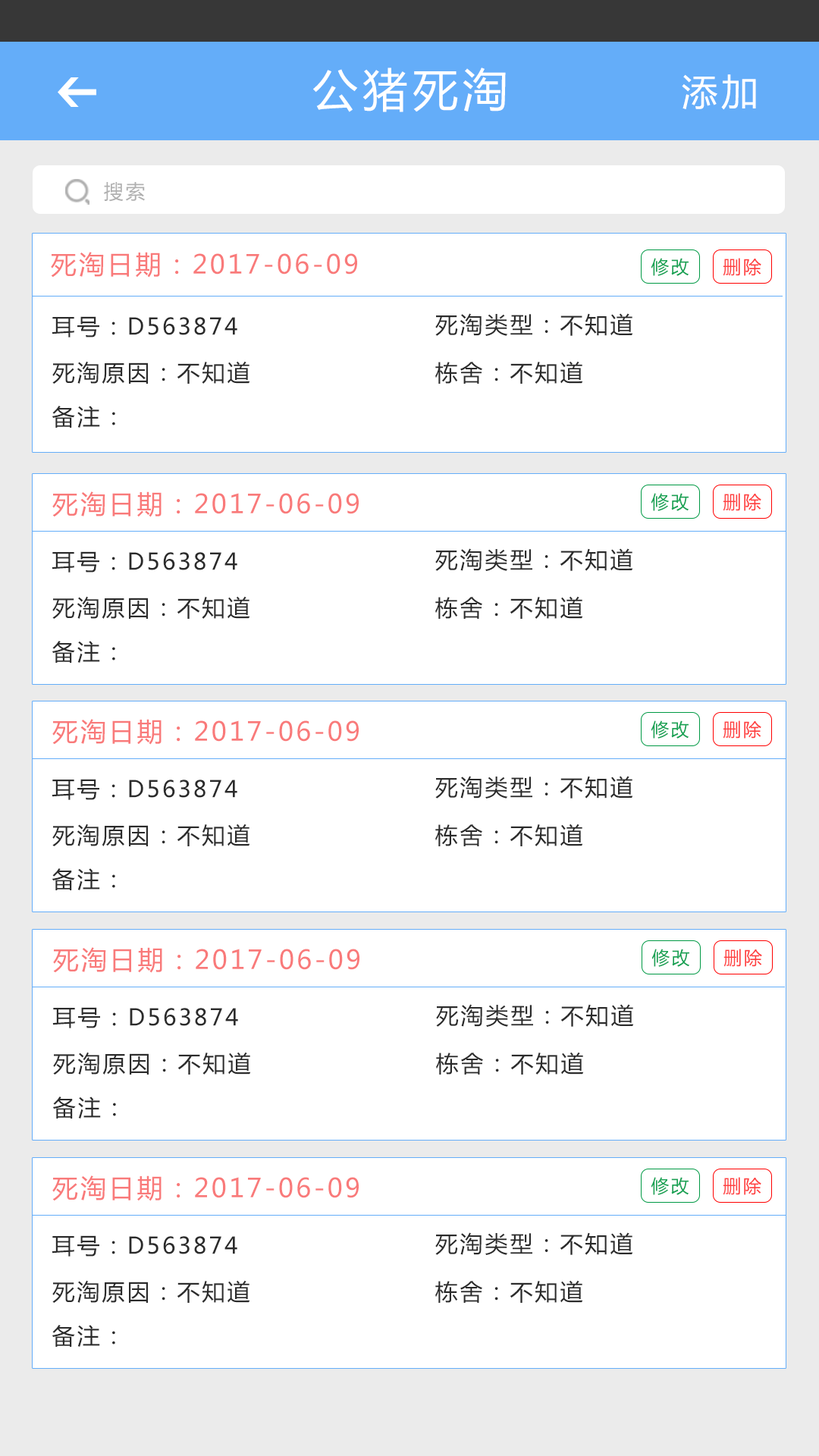
<style>
.page{position:relative;width:819px;height:1456px;background:#ffffff}
.page>*{position:absolute;margin:0}
.t1{font:45.5px "MicrosoftYaHei";letter-spacing:0.1em;color:#ffffff}
.t2{font:36.4px "MicrosoftYaHei";letter-spacing:0.1em;color:#ffffff}
.t3{font:19.7px "MicrosoftYaHei";letter-spacing:0.1em;color:#b0b0b0}
.t4{font:25.8px "MicrosoftYaHei";letter-spacing:0.1em;color:#f97a7a}
.t5{font:18.2px "MicrosoftYaHei";letter-spacing:0.1em;color:#16a254}
.t6{font:18.2px "MicrosoftYaHei";letter-spacing:0.1em;color:#ff3f3f}
.t7{font:22.7px "MicrosoftYaHei";letter-spacing:0.1em;color:#2b2b2b}
</style>
<div class="page">
<p class="t1" style="left:313px;top:67px;width:193px;height:45px">公猪死淘</p>
<p class="t2" style="left:682px;top:74px;width:74px;height:36px">添加</p>
<p class="t3" style="left:104px;top:182px;width:41px;height:20px">搜索</p>
<p class="t4" style="left:51px;top:252px;width:306px;height:26px">死淘日期：2017-06-09</p>
<p class="t5" style="left:651px;top:258px;width:38px;height:18px">修改</p>
<p class="t6" style="left:723px;top:258px;width:38px;height:18px">删除</p>
<p class="t7" style="left:52px;top:316px;width:185px;height:21px">耳号：D563874</p>
<p class="t7" style="left:435px;top:313px;width:198px;height:23px">死淘类型：不知道</p>
<p class="t7" style="left:52px;top:361px;width:198px;height:23px">死淘原因：不知道</p>
<p class="t7" style="left:435px;top:361px;width:148px;height:23px">栋舍：不知道</p>
<p class="t7" style="left:52px;top:406px;width:63px;height:22px">备注：</p>
<p class="t4" style="left:52px;top:491px;width:307px;height:26px">死淘日期：2017-06-09</p>
<p class="t5" style="left:651px;top:493px;width:38px;height:18px">修改</p>
<p class="t6" style="left:723px;top:493px;width:38px;height:18px">删除</p>
<p class="t7" style="left:52px;top:551px;width:185px;height:22px">耳号：D563874</p>
<p class="t7" style="left:435px;top:548px;width:198px;height:23px">死淘类型：不知道</p>
<p class="t7" style="left:52px;top:596px;width:198px;height:23px">死淘原因：不知道</p>
<p class="t7" style="left:435px;top:596px;width:148px;height:23px">栋舍：不知道</p>
<p class="t7" style="left:52px;top:641px;width:63px;height:22px">备注：</p>
<p class="t4" style="left:52px;top:719px;width:307px;height:26px">死淘日期：2017-06-09</p>
<p class="t5" style="left:651px;top:720px;width:38px;height:19px">修改</p>
<p class="t6" style="left:723px;top:720px;width:38px;height:19px">删除</p>
<p class="t7" style="left:52px;top:779px;width:185px;height:21px">耳号：D563874</p>
<p class="t7" style="left:435px;top:776px;width:198px;height:23px">死淘类型：不知道</p>
<p class="t7" style="left:52px;top:824px;width:198px;height:22px">死淘原因：不知道</p>
<p class="t7" style="left:435px;top:824px;width:148px;height:22px">栋舍：不知道</p>
<p class="t7" style="left:52px;top:868px;width:63px;height:22px">备注：</p>
<p class="t4" style="left:53px;top:947px;width:306px;height:26px">死淘日期：2017-06-09</p>
<p class="t5" style="left:651px;top:949px;width:39px;height:18px">修改</p>
<p class="t6" style="left:723px;top:949px;width:39px;height:18px">删除</p>
<p class="t7" style="left:52px;top:1007px;width:186px;height:21px">耳号：D563874</p>
<p class="t7" style="left:436px;top:1004px;width:198px;height:23px">死淘类型：不知道</p>
<p class="t7" style="left:53px;top:1052px;width:198px;height:23px">死淘原因：不知道</p>
<p class="t7" style="left:436px;top:1052px;width:148px;height:23px">栋舍：不知道</p>
<p class="t7" style="left:52px;top:1097px;width:64px;height:22px">备注：</p>
<p class="t4" style="left:52px;top:1175px;width:307px;height:26px">死淘日期：2017-06-09</p>
<p class="t5" style="left:651px;top:1177px;width:38px;height:18px">修改</p>
<p class="t6" style="left:723px;top:1177px;width:38px;height:18px">删除</p>
<p class="t7" style="left:52px;top:1235px;width:185px;height:22px">耳号：D563874</p>
<p class="t7" style="left:435px;top:1232px;width:198px;height:23px">死淘类型：不知道</p>
<p class="t7" style="left:52px;top:1280px;width:198px;height:23px">死淘原因：不知道</p>
<p class="t7" style="left:435px;top:1280px;width:148px;height:23px">栋舍：不知道</p>
<p class="t7" style="left:52px;top:1325px;width:63px;height:22px">备注：</p>
</div>
